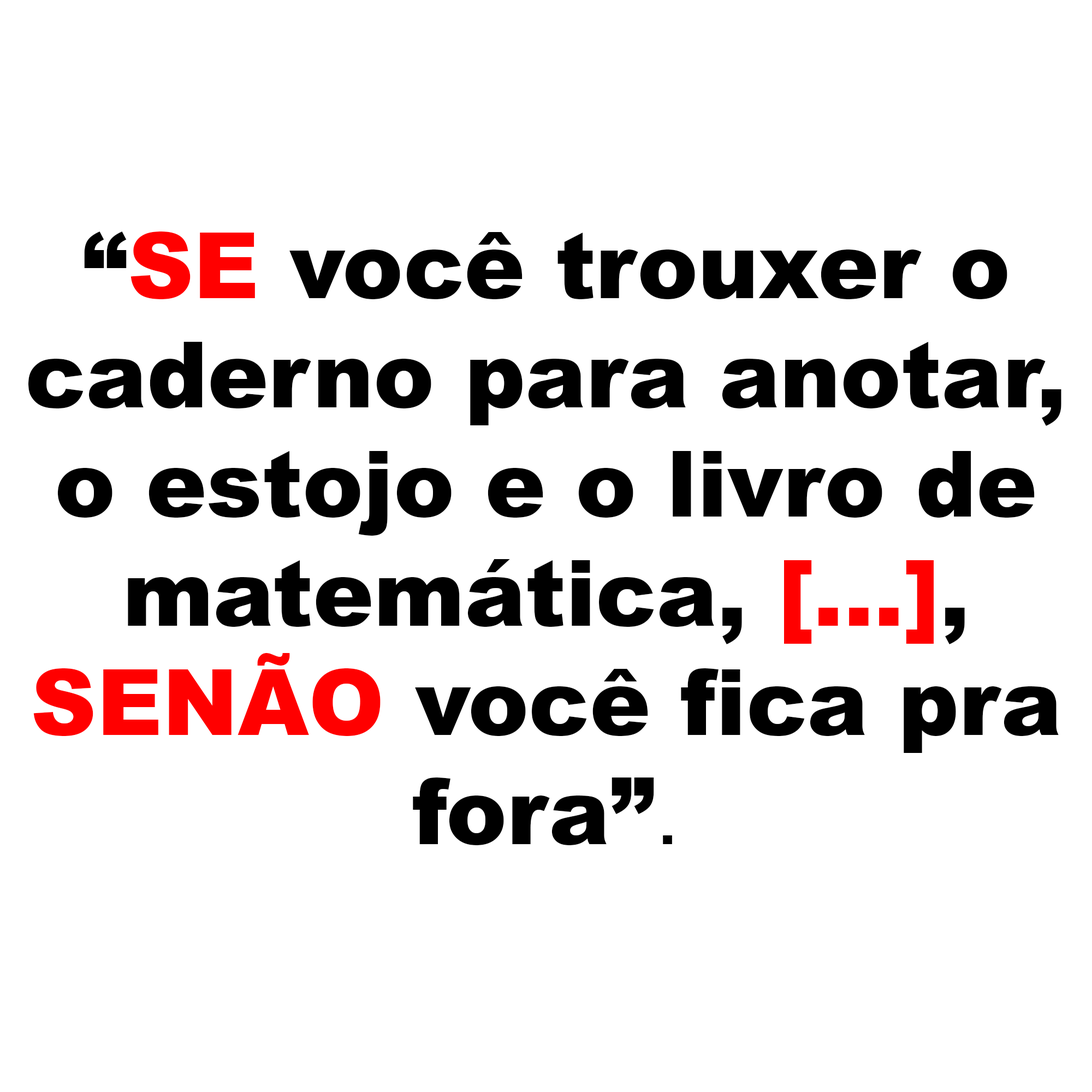
<style>
.page{position:relative;width:1092px;height:1092px;background:#ffffff}
.page>*{position:absolute;margin:0}
.t1{font:91px "Arial-Black";color:#000000}
.t2{font:91px "Arial-Black";color:#ff0000}
.t3{font:91px "ArialMT";color:#000000}
</style>
<div class="page">
<p class="t1" style="left:28px;top:232px;width:1033px;height:613px;text-align:center">“<span class="t2">SE</span> você trouxer o<br>caderno para anotar,<br>o estojo e o livro de<br>matemática, <span class="t2">[...]</span>,<br><span class="t2">SENÃO</span> você fica pra<br>fora”<span class="t3">.</span></p>
</div>
